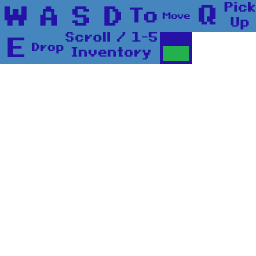
<style>
.page{position:relative;width:256px;height:256px;background:#ffffff}
.page>*{position:absolute;margin:0}
.t1{font:25px "PixeloidSans-Bold";letter-spacing:-0.05em;color:#2612a6}
.t2{font:25px "PixeloidSans-Bold";color:#2612a6}
.t3{font:12.5px "PixeloidSans-Bold";color:#2612a6}
.t4{font:19.3px "PixeloidSans-Bold";letter-spacing:-0.05em;color:#2612a6}
.t5{font:8.7px "PixeloidSans-Bold";letter-spacing:-0.05em;color:#2612a6}
.t6{font:10.7px "PixeloidSans-Bold";color:#2612a6}
</style>
<div class="page">
<p class="t1" style="left:4px;top:6px;width:23px;height:20px">W</p>
<p class="t1" style="left:40px;top:6px;width:17px;height:20px">A</p>
<p class="t1" style="left:72px;top:6px;width:17px;height:20px">S</p>
<p class="t1" style="left:104px;top:6px;width:17px;height:20px">D</p>
<p class="t2" style="left:198px;top:5px;width:18px;height:20px">Q</p>
<p class="t3" style="left:224px;top:2px;width:31px;height:28px;text-align:center">Pick<br>Up</p>
<p class="t4" style="left:130px;top:7px;width:27px;height:16px">To</p>
<p class="t5" style="left:162px;top:12px;width:28px;height:7px">Move</p>
<p class="t2" style="left:7px;top:37px;width:18px;height:20px">E</p>
<p class="t3" style="left:65px;top:32px;width:92px;height:28px;text-align:center">Scroll / 1-5<br>Inventory</p>
<p class="t6" style="left:32px;top:42px;width:32px;height:12px">Drop</p>
</div>
